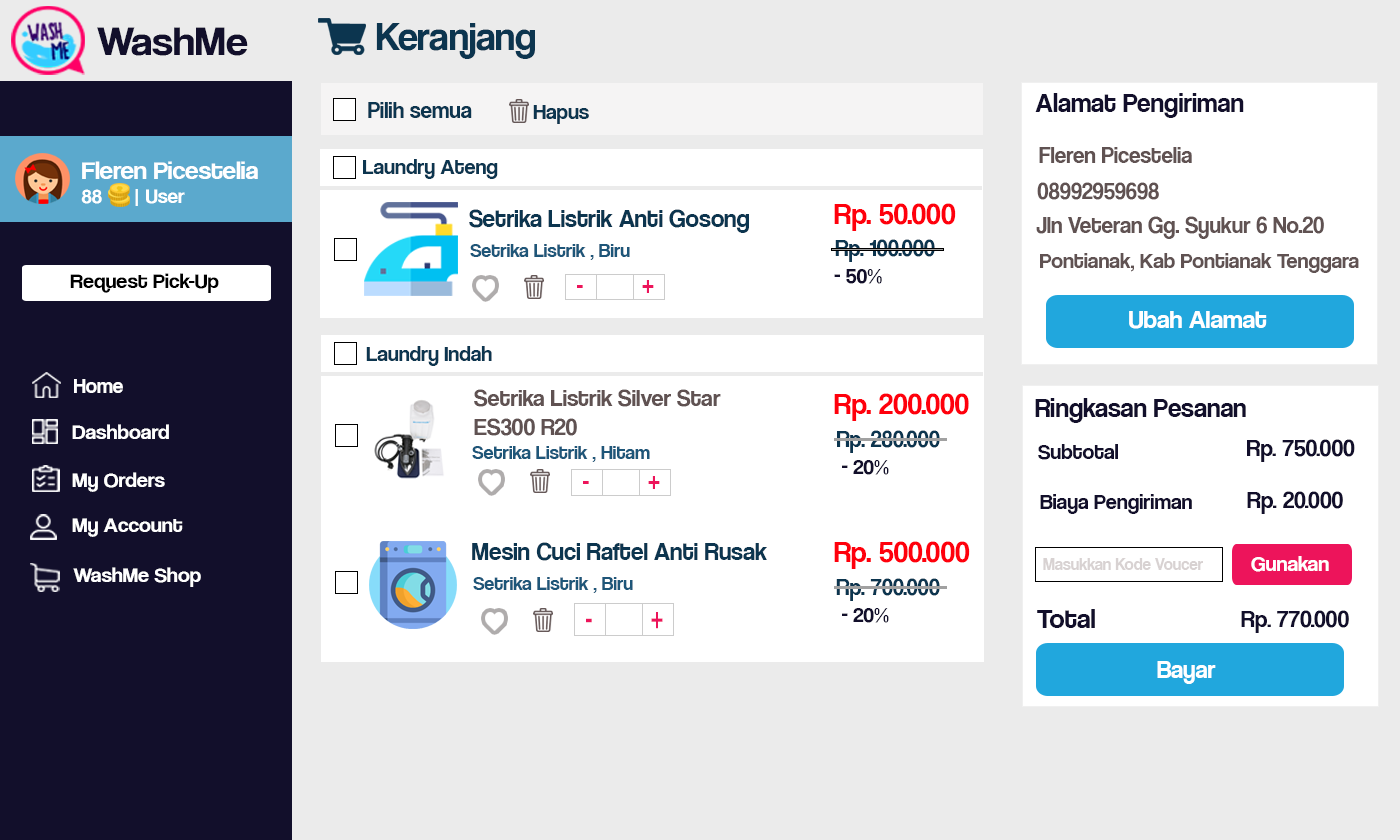
<style>
.page{position:relative;width:1400px;height:840px;background:#ffffff}
.page>*{position:absolute;margin:0}
.t1{font:42.1px "CoolveticaRg-Regular";color:#120f2b;scale:1.05 1}
.t2{font:40.4px "CoolveticaRg-Regular";color:#0c354f}
.t3{font:23px "CoolveticaRg-Regular";color:#0c354f}
.t4{font:27px "CoolveticaRg-Regular";color:#120f2b}
.t5{font:22px "CoolveticaRg-Regular";color:#0c354f}
.t6{font:23px "CoolveticaRg-Regular";color:#605252}
.t7{font:25.2px "CoolveticaRg-Regular";color:#ffffff;scale:1.05 1}
.t8{font:20px "CoolveticaRg-Regular";color:#ffffff;scale:1.05 1}
.t9{font:25px "CoolveticaRg-Regular";color:#0c354f}
.t10{font:30.2px "CoolveticaRg-Regular";color:#ff000c}
.t11{font:20px "CoolveticaRg-Regular";color:#1e5679}
.t12{font:23.1px "CoolveticaRg-Regular";color:#0c354f}
.t13{font:22px "CoolveticaRg-Regular";color:#605252}
.t14{font:22.1px "CoolveticaRg-Regular";color:#120f2b}
.t15{font:21px "CoolveticaRg-Regular";color:#000000;scale:1.05 1}
.t16{font:26.6px "CoolveticaRg-Regular";color:#ed145b;scale:0.88 1}
.t17{font:26px "CoolveticaRg-Regular";color:#ffffff}
.t18{font:21px "CoolveticaRg-Regular";color:#ffffff}
.t19{font:24px "CoolveticaRg-Regular";color:#605252}
.t20{font:30px "CoolveticaRg-Regular";color:#ff000c}
.t21{font:21px "CoolveticaRg-Regular";color:#ffffff;scale:1.05 1}
.t22{font:22px "CoolveticaRg-Regular";color:#120f2b}
.t23{font:24px "CoolveticaRg-Regular";color:#120f2b}
.t24{font:27.4px "CoolveticaRg-Regular";color:#ed145b;scale:0.85 1}
.t25{font:16.9px "CoolveticaRg-Regular";color:#d8d2d2}
.t26{font:22px "CoolveticaRg-Regular";color:#ffffff}
.t27{font:34.5px "CoolveticaRg-Regular";color:#ed145b;scale:0.68 1}
.t28{font:28px "CoolveticaRg-Regular";color:#120f2b}
.t29{font:25px "CoolveticaRg-Regular";color:#ffffff}
</style>
<div class="page">
<p class="t1" style="left:97px;top:27px;width:151px;height:29px">WashMe</p>
<p class="t2" style="left:376px;top:23px;width:159px;height:36px">Keranjang</p>
<p class="t3" style="left:368px;top:102px;width:104px;height:16px">Pilih semua</p>
<p class="t4" style="left:1035px;top:93px;width:209px;height:25px">Alamat Pengiriman</p>
<p class="t5" style="left:533px;top:105px;width:56px;height:19px">Hapus</p>
<p class="t6" style="left:1039px;top:147px;width:153px;height:16px">Fleren Picestelia</p>
<p class="t7" style="left:81px;top:161px;width:177px;height:45px">Fleren Picestelia<br><span class="t8">88      | User</span></p>
<p class="t5" style="left:363px;top:159px;width:135px;height:20px">Laundry Ateng</p>
<p class="t6" style="left:1037px;top:182px;width:122px;height:18px">08992959698</p>
<p class="t9" style="left:469px;top:209px;width:280px;height:24px">Setrika Listrik Anti Gosong</p>
<p class="t10" style="left:834px;top:203px;width:122px;height:28px">Rp. 50.000</p>
<p class="t6" style="left:1036px;top:216px;width:288px;height:23px">Jln Veteran Gg. Syukur 6 No.20</p>
<p class="t11" style="left:470px;top:244px;width:160px;height:16px">Setrika Listrik , Biru</p>
<p class="t12" style="left:835px;top:239px;width:100px;height:23px">Rp. 100.000</p>
<p class="t13" style="left:1040px;top:253px;width:319px;height:20px">Pontianak, Kab Pontianak Tenggara</p>
<p class="t14" style="left:834px;top:269px;width:48px;height:15px">- 50%</p>
<p class="t15" style="left:70px;top:273px;width:149px;height:20px">Request Pick-Up</p>
<p class="t16" style="left:642px;top:280px;width:12px;height:13px">+</p>
<p class="t16" style="left:577px;top:285px;width:6px;height:3px">-</p>
<p class="t17" style="left:1129px;top:311px;width:138px;height:18px">Ubah Alamat</p>
<p class="t5" style="left:366px;top:346px;width:126px;height:20px">Laundry Indah</p>
<p class="t18" style="left:74px;top:379px;width:49px;height:14px">Home</p>
<p class="t19" style="left:474px;top:389px;width:247px;height:47px">Setrika Listrik Silver Star <br>ES300 R20</p>
<p class="t20" style="left:834px;top:393px;width:135px;height:28px">Rp. 200.000</p>
<p class="t4" style="left:1035px;top:398px;width:211px;height:25px">Ringkasan Pesanan</p>
<p class="t21" style="left:72px;top:424px;width:97px;height:15px">Dashboard</p>
<p class="t3" style="left:837px;top:430px;width:103px;height:23px">Rp. 280.000</p>
<p class="t11" style="left:472px;top:446px;width:178px;height:16px">Setrika Listrik , Hitam</p>
<p class="t22" style="left:1038px;top:444px;width:80px;height:16px">Subtotal</p>
<p class="t23" style="left:1247px;top:439px;width:108px;height:23px">Rp. 750.000</p>
<p class="t22" style="left:842px;top:460px;width:47px;height:15px">- 20%</p>
<p class="t21" style="left:72px;top:472px;width:93px;height:20px">My Orders</p>
<p class="t24" style="left:583px;top:481px;width:6px;height:3px">-</p>
<p class="t24" style="left:648px;top:476px;width:12px;height:13px">+</p>
<p class="t22" style="left:1040px;top:494px;width:152px;height:20px">Biaya Pengiriman</p>
<p class="t23" style="left:1247px;top:491px;width:96px;height:23px">Rp. 20.000</p>
<p class="t21" style="left:72px;top:518px;width:111px;height:19px">My Account</p>
<p class="t9" style="left:472px;top:542px;width:295px;height:19px">Mesin Cuci Raftel Anti Rusak</p>
<p class="t20" style="left:834px;top:541px;width:136px;height:28px">Rp. 500.000</p>
<p class="t25" style="left:1043px;top:558px;width:160px;height:12px">Masukkan Kode Voucer</p>
<p class="t26" style="left:1251px;top:556px;width:78px;height:16px">Gunakan</p>
<p class="t21" style="left:73px;top:567px;width:128px;height:20px">WashMe Shop</p>
<p class="t11" style="left:473px;top:577px;width:160px;height:16px">Setrika Listrik , Biru</p>
<p class="t3" style="left:836px;top:578px;width:104px;height:23px">Rp. 700.000</p>
<p class="t27" style="left:651px;top:612px;width:12px;height:17px">+</p>
<p class="t22" style="left:842px;top:608px;width:47px;height:15px">- 20%</p>
<p class="t28" style="left:1037px;top:609px;width:58px;height:19px">Total</p>
<p class="t23" style="left:1241px;top:610px;width:108px;height:23px">Rp. 770.000</p>
<p class="t27" style="left:586px;top:618px;width:6px;height:5px">-</p>
<p class="t29" style="left:1157px;top:661px;width:59px;height:23px">Bayar</p>
</div>
